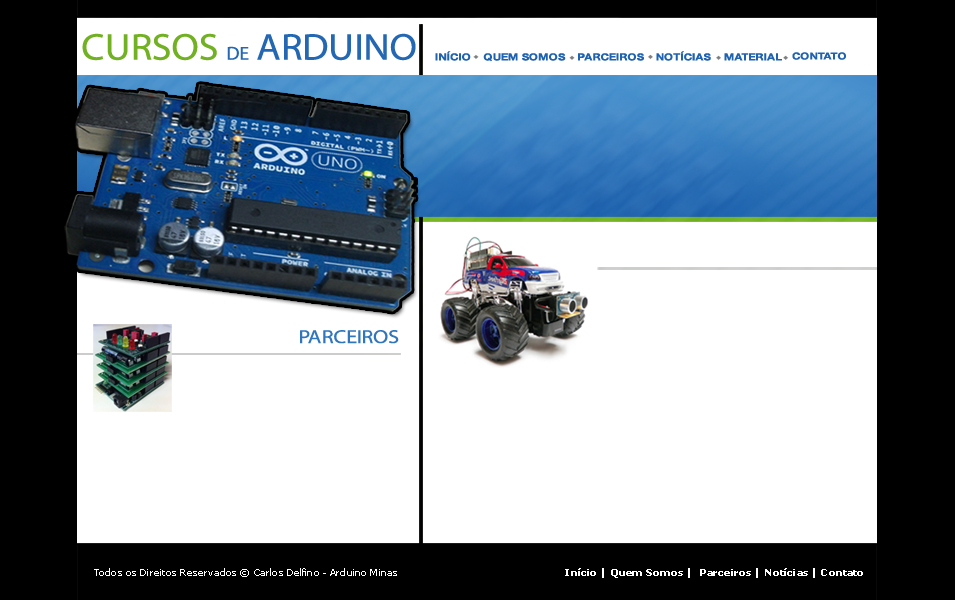
<style>
.page{position:relative;width:955px;height:600px;background:#ffffff}
.page>*{position:absolute;margin:0}
.t1{font:37.5px "MyriadPro-Regular";color:#2468b3;text-transform:uppercase;scale:1.06 1}
.t2{font:37.5px "MyriadPro-Regular";color:#72b123;text-transform:uppercase;scale:1.06 1}
.t3{font:18.8px "MyriadPro-Regular";color:#2468b3;text-transform:uppercase;scale:1.06 1}
.t4{font:9.7px "HelveticaNeueLTStd-Bd";color:#1f62af;text-transform:uppercase;scale:1.17 1}
.t5{font:18.8px "MyriadPro-Regular";color:#3076bd;text-transform:uppercase;scale:1.17 1}
.t6{font:9.4px "Tahoma";color:#ffffff;scale:1.17 1}
.t7{font:9.4px "Tahoma-Bold";color:#ffffff;scale:1.17 1}
</style>
<div class="page">
<p class="t1" style="left:82px;top:33px;width:334px;height:28px"><span class="t2">Cursos </span><span class="t3">de </span>Arduino</p>
<p class="t4" style="left:435px;top:51px;width:36px;height:10px">Início</p>
<p class="t4" style="left:483px;top:53px;width:83px;height:9px">Quem Somos</p>
<p class="t4" style="left:578px;top:53px;width:66px;height:8px">Parceiros</p>
<p class="t4" style="left:656px;top:51px;width:55px;height:10px">Notícias</p>
<p class="t4" style="left:724px;top:53px;width:58px;height:8px">Material</p>
<p class="t4" style="left:792px;top:52px;width:54px;height:8px">Contato</p>
<p class="t5" style="left:300px;top:330px;width:99px;height:14px">Parceiros</p>
<p class="t6" style="left:94px;top:568px;width:303px;height:9px">Todos os Direitos Reservados © Carlos Delfino - Arduino Minas</p>
<p class="t7" style="left:565px;top:568px;width:298px;height:10px">Início | Quem Somos |  Parceiros | Notícias | Contato</p>
</div>
